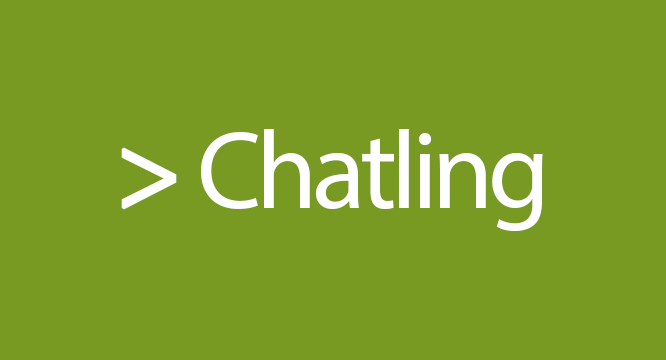
<style>
.page{position:relative;width:666px;height:360px;background:#789922}
.page>*{position:absolute;margin:0}
.t1{font:111px "MyriadPro-Regular";letter-spacing:-0.05em;color:#ffffff}
.t2{font:111px "MyriadPro-Regular";letter-spacing:-0.05em;color:#ffffff;font-weight:bold}
</style>
<div class="page">
<p class="t1" style="left:121px;top:129px;width:422px;height:103px"><span class="t2">&gt;</span> Chatling</p>
</div>
